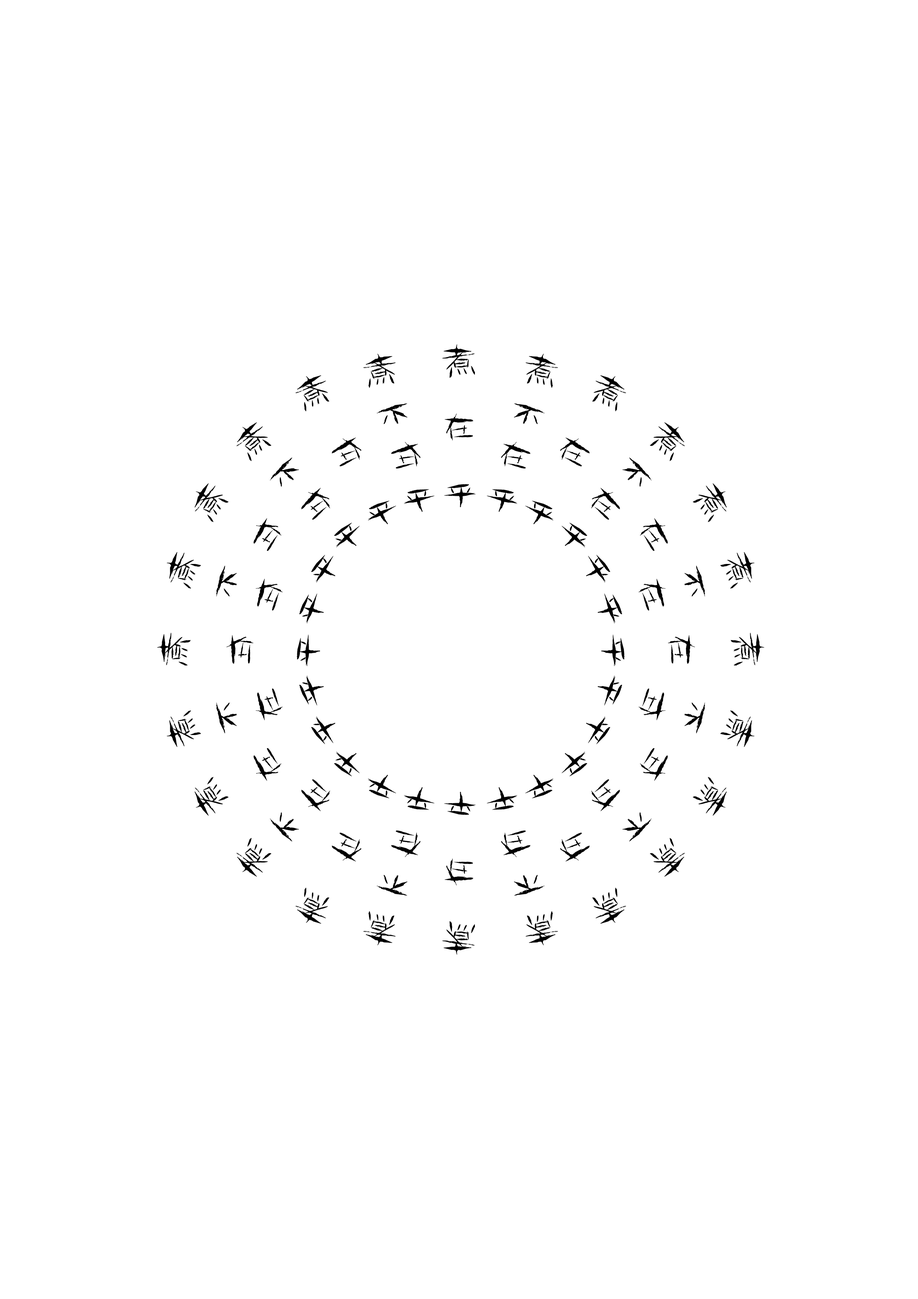
<style>
.page{position:relative;width:918px;height:1299px;background:#ffffff}
.page>*{position:absolute;margin:0}
.t1{font:38.6px/44.7px "--";letter-spacing:0.1em;color:#000000}
.t2{font:38.6px/66.3px "--";letter-spacing:0.1em;color:#000000}
.t3{font:38.6px/69.4px "--";letter-spacing:0.1em;color:#000000}
</style>
<div class="page">
<p class="t1" style="left:363px;top:354px;width:72px;height:158px;text-align:center;rotate:163deg">煮<br>不<br>在<br>乎</p>
<p class="t2" style="left:442px;top:344px;width:34px;height:164px;text-align:center">煮<br>在<br>乎</p>
<p class="t1" style="left:487px;top:354px;width:71px;height:158px;text-align:center;rotate:17deg">煮<br>不<br>在<br>乎</p>
<p class="t3" style="left:295px;top:375px;width:101px;height:149px;text-align:center;rotate:150deg">煮<br>在<br>乎</p>
<p class="t3" style="left:525px;top:375px;width:101px;height:149px;text-align:center;rotate:30deg">煮<br>在<br>乎</p>
<p class="t1" style="left:236px;top:422px;width:124px;height:126px;text-align:center;rotate:135deg">煮<br>不<br>在<br>乎</p>
<p class="t1" style="left:562px;top:422px;width:123px;height:126px;text-align:center;rotate:45deg">煮<br>不<br>在<br>乎</p>
<p class="t2" style="left:194px;top:483px;width:141px;height:100px;text-align:center;rotate:120deg">煮<br>在<br>乎</p>
<p class="t2" style="left:586px;top:483px;width:141px;height:100px;text-align:center;rotate:60deg">煮<br>在<br>乎</p>
<p class="t1" style="left:167px;top:552px;width:157px;height:71px;text-align:center;rotate:106deg">煮<br>不<br>在<br>乎</p>
<p class="t1" style="left:598px;top:552px;width:157px;height:71px;text-align:center;rotate:74deg">煮<br>不<br>在<br>乎</p>
<p class="t2" style="left:157px;top:632px;width:164px;height:34px;text-align:center;rotate:90deg">煮<br>在<br>乎</p>
<p class="t2" style="left:601px;top:632px;width:164px;height:34px;text-align:center;rotate:90deg">煮<br>在<br>乎</p>
<p class="t1" style="left:167px;top:675px;width:157px;height:72px;text-align:center;rotate:-106deg">煮<br>不<br>在<br>乎</p>
<p class="t1" style="left:598px;top:675px;width:157px;height:72px;text-align:center;rotate:-74deg">煮<br>不<br>在<br>乎</p>
<p class="t2" style="left:194px;top:716px;width:141px;height:100px;text-align:center;rotate:-120deg">煮<br>在<br>乎</p>
<p class="t2" style="left:586px;top:716px;width:141px;height:100px;text-align:center;rotate:-60deg">煮<br>在<br>乎</p>
<p class="t1" style="left:236px;top:751px;width:124px;height:126px;text-align:center;rotate:-135deg">煮<br>不<br>在<br>乎</p>
<p class="t1" style="left:562px;top:751px;width:123px;height:126px;text-align:center;rotate:-45deg">煮<br>不<br>在<br>乎</p>
<p class="t3" style="left:295px;top:775px;width:101px;height:149px;text-align:center;rotate:-150deg">煮<br>在<br>乎</p>
<p class="t3" style="left:525px;top:775px;width:101px;height:149px;text-align:center;rotate:-30deg">煮<br>在<br>乎</p>
<p class="t1" style="left:363px;top:787px;width:72px;height:158px;text-align:center;rotate:-163deg">煮<br>不<br>在<br>乎</p>
<p class="t2" style="left:442px;top:791px;width:34px;height:164px;text-align:center">煮<br>在<br>乎</p>
<p class="t1" style="left:487px;top:787px;width:71px;height:158px;text-align:center;rotate:-17deg">煮<br>不<br>在<br>乎</p>
</div>
